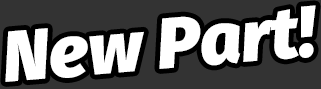
<style>
.page{position:relative;width:321px;height:89px;background:#333333}
.page>*{position:absolute;margin:0}
.t1{font:72px "FiraSans-BlackItalic";color:#ffffff}
</style>
<div class="page">
<p class="t1" style="left:5px;top:5px;width:311px;height:77px;rotate:-5deg">New Part!</p>
</div>
